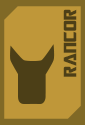
<style>
.page{position:relative;width:85px;height:125px;background:#bf9739}
.page>*{position:absolute;margin:0}
.t1{font:20px "TransformersMovie";letter-spacing:0.04em;color:#4d3f17}
.t2{font:20px "TransformersMovie";color:#4d3f17}
</style>
<div class="page">
<p class="t1" style="left:63px;top:9px;width:14px;height:68px;rotate:-90deg"><span class="t2">Ra</span>nco<span class="t2">r</span></p>
</div>
